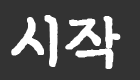
<style>
.page{position:relative;width:140px;height:80px;background:#333333}
.page>*{position:absolute;margin:0}
.t1{font:60px "ChosunCentennial";letter-spacing:-0.01em;color:#ffffff;font-weight:bold}
</style>
<div class="page">
<p class="t1" style="left:11px;top:15px;width:110px;height:54px">시작</p>
</div>
